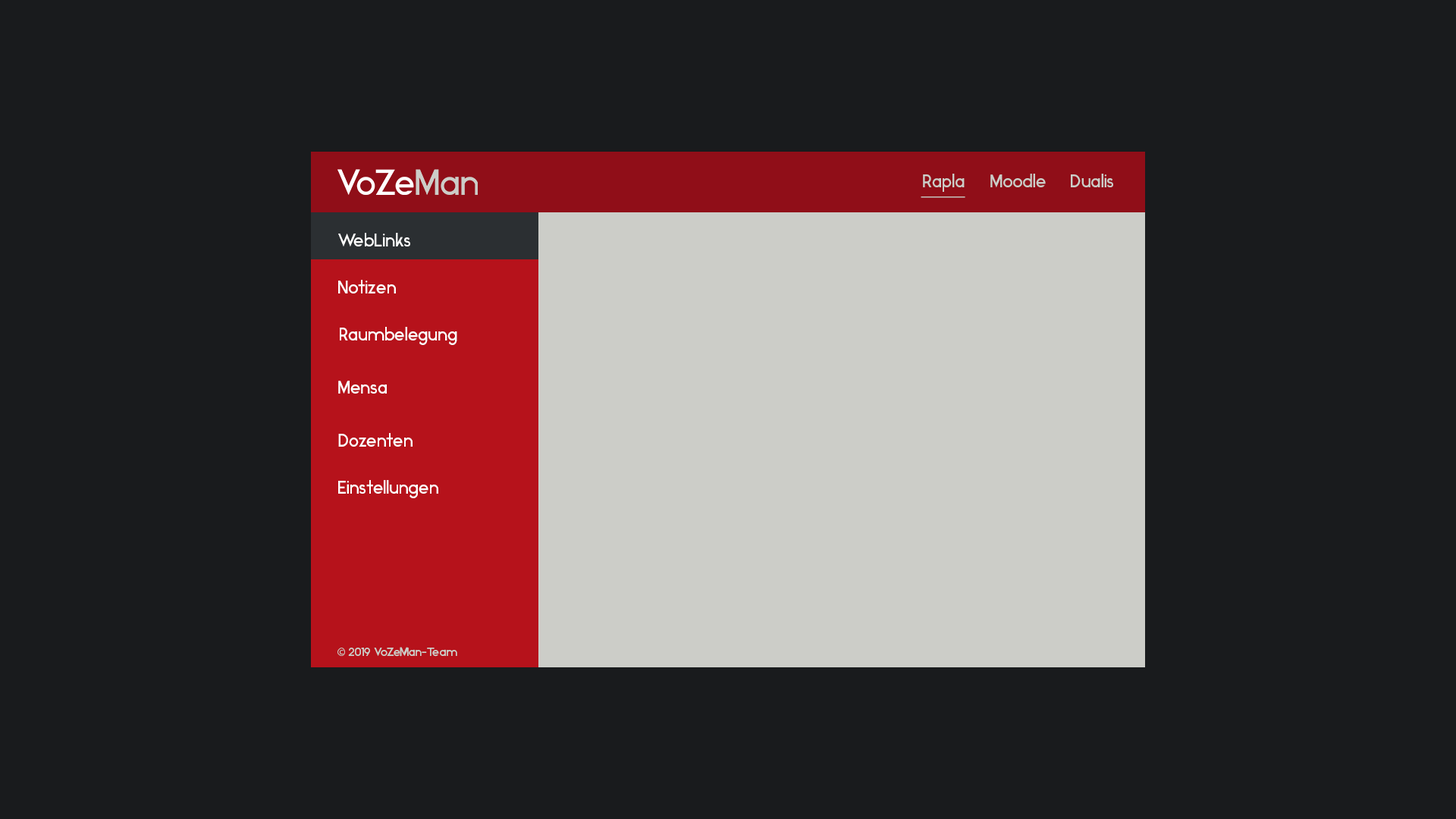
<style>
.page{position:relative;width:1456px;height:819px;background:#191b1d}
.page>*{position:absolute;margin:0}
.t1{font:18.2px "Ikaros-Regular";color:#cccdc8;text-decoration:underline}
.t2{font:18.2px "Ikaros-Regular";color:#cccdc8}
.t3{font:18.2px "Ikaros-Regular";color:#ffffff}
.t4{font:12.1px "Ikaros-Regular";color:#cccdc8}
.t5{font:12.1px "MyriadPro-Regular";color:#cccdc8}
</style>
<div class="page">
<p class="t1" style="left:921px;top:174px;width:44px;height:24px">Rapla</p>
<p class="t2" style="left:990px;top:174px;width:56px;height:13px">Moodle</p>
<p class="t2" style="left:1071px;top:174px;width:42px;height:13px">Dualis</p>
<p class="t3" style="left:338px;top:233px;width:72px;height:13px">WebLinks</p>
<p class="t3" style="left:338px;top:280px;width:58px;height:13px">Notizen</p>
<p class="t3" style="left:340px;top:327px;width:117px;height:18px">Raumbelegung</p>
<p class="t3" style="left:338px;top:381px;width:49px;height:13px">Mensa</p>
<p class="t3" style="left:338px;top:433px;width:75px;height:14px">Dozenten</p>
<p class="t3" style="left:338px;top:480px;width:100px;height:18px">Einstellungen</p>
<p class="t4" style="left:337px;top:647px;width:120px;height:10px"><span class="t5">© </span>2019 VoZeMan-Team</p>
</div>
